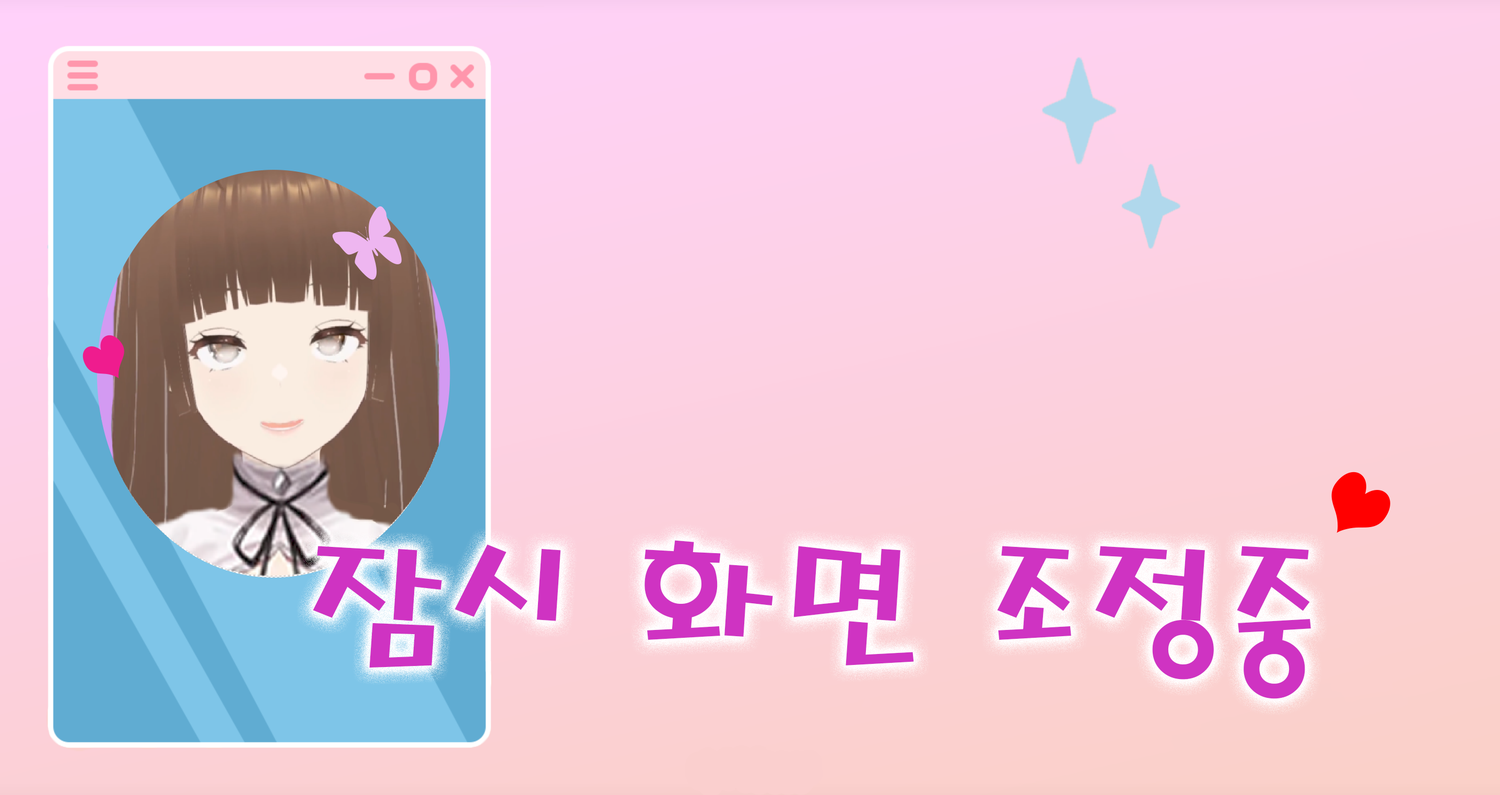
<style>
.page{position:relative;width:1500px;height:795px}
.page>*{position:absolute;margin:0}
.t1{font:161.5px "MagicR-HM";color:#cf33c2}
</style>
<div class="page">
<p class="t1" style="left:313px;top:540px;width:998px;height:159px">잠시 화면 조정중</p>
</div>
